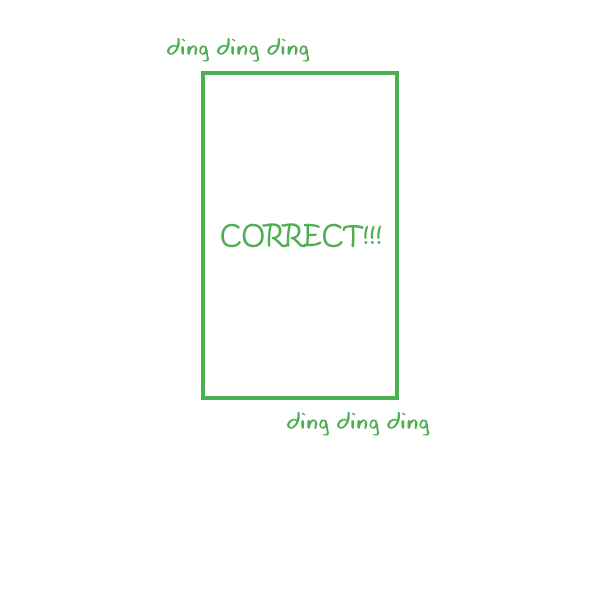
<style>
.page{position:relative;width:600px;height:600px;background:#ffffff}
.page>*{position:absolute;margin:0}
.t1{font:25px "EagerNaturalist";color:#4caf50}
.t2{font:26px "KristenITC-Regular";color:#4caf50}
</style>
<div class="page">
<p class="t1" style="left:167px;top:38px;width:143px;height:24px">ding ding ding</p>
<p class="t2" style="left:221px;top:223px;width:160px;height:25px">CORRECT!!!</p>
<p class="t1" style="left:287px;top:412px;width:143px;height:24px">ding ding ding</p>
</div>
